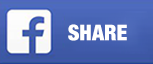
<style>
.page{position:relative;width:153px;height:64px}
.page>*{position:absolute;margin:0}
.t1{font:21.8px "HelveticaNeue-CondensedBlack";color:#ffffff}
</style>
<div class="page">
<p class="t1" style="left:68px;top:24px;width:59px;height:17px">SHARE</p>
</div>
